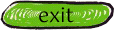
<style>
.page{position:relative;width:114px;height:30px}
.page>*{position:absolute;margin:0}
.t1{font:20px "Gotu-Regular";color:#000000}
</style>
<div class="page">
<p class="t1" style="left:39px;top:7px;width:35px;height:16px">exit</p>
</div>
